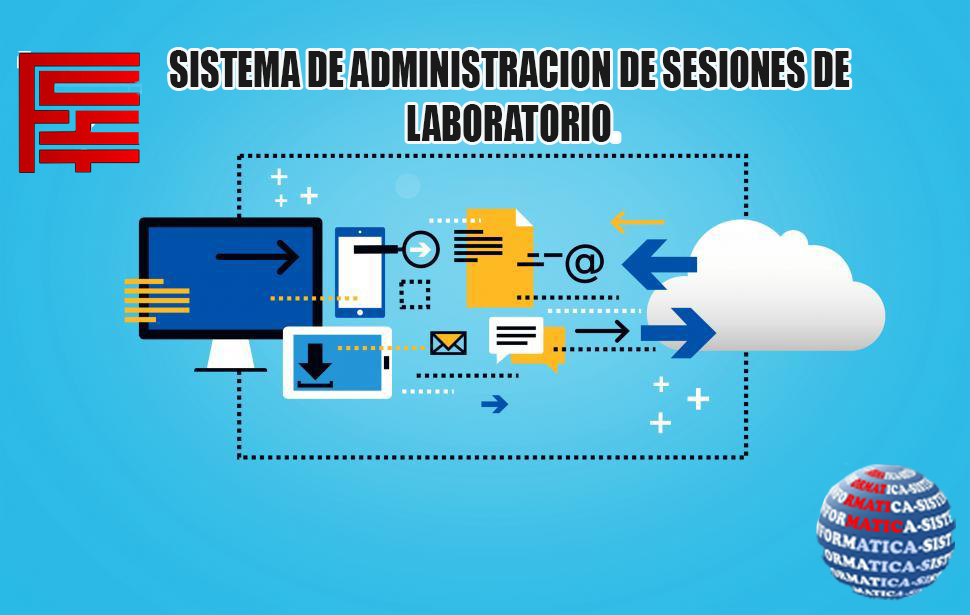
<style>
.page{position:relative;width:970px;height:615px}
.page>*{position:absolute;margin:0}
.t1{font:45px "Impact";color:#1a1a1a;scale:0.85 1}
.t2{font:45px "Impact";color:#ffffff;scale:0.85 1}
</style>
<div class="page">
<p class="t1" style="left:169px;top:50px;width:681px;height:92px;text-align:center">SISTEMA DE ADMINISTRACION DE SESIONES DE <br>LABORATORIO<span class="t2">.</span></p>
</div>
